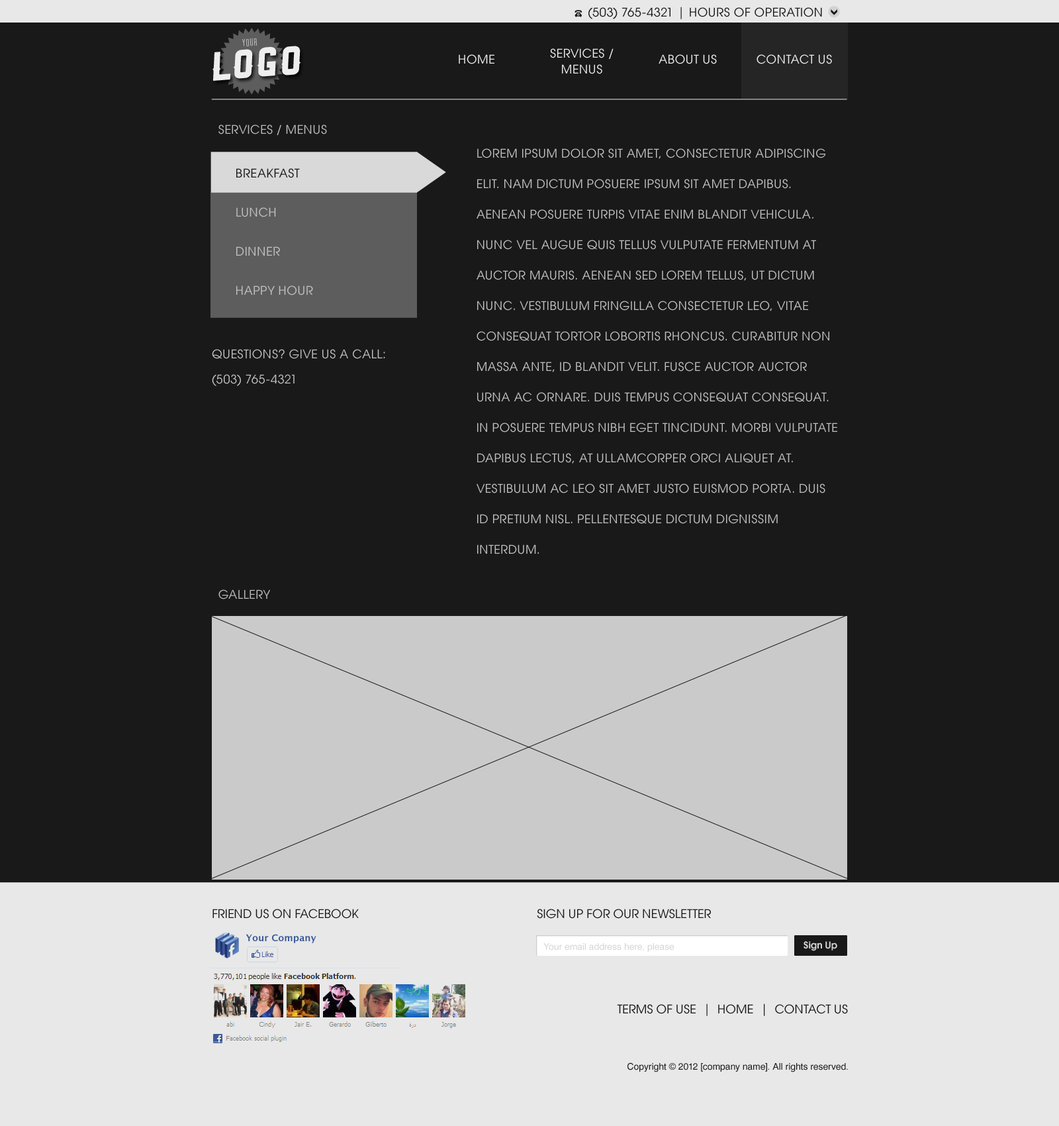
<style>
.page{position:relative;width:1059px;height:1126px;background:#1a1919}
.page>*{position:absolute;margin:0}
.t1{font:11.9px "AvantGardeCE-Book";letter-spacing:0.025em;color:#1a1919;text-transform:uppercase}
.t2{font:10.4px "ArvilSans";letter-spacing:0.05em;color:#c1c0c0}
.t3{font:38.7px "Ranger";letter-spacing:0.05em;color:#eeeeee}
.t4{font:11.9px/15.9px "AvantGardeCE-Book";letter-spacing:0.025em;color:#eeeeee;text-transform:uppercase}
.t5{font:11.9px "AvantGardeCE-Book";letter-spacing:0.025em;color:#eeeeee;text-transform:uppercase}
.t6{font:11.9px "AvantGardeCE-Book";letter-spacing:0.025em;color:#bcbcbc;text-transform:uppercase}
.t7{font:11.9px/30.5px "AvantGardeCE-Book";letter-spacing:0.025em;color:#c1c1c1;text-transform:uppercase}
.t8{font:11.9px/16.6px "AvantGardeCE-Book";letter-spacing:0.025em;color:#c1c1c1;text-transform:uppercase}
.t9{font:11.9px "AvantGardeCE-Book";color:#1a1919;text-transform:uppercase}
.t10{font:9.3px "LucidaSans-Demi";color:#3b5998}
.t11{font:9.3px "AvantGardeCE-Demi";color:#d5d5d5}
.t12{font:9.3px "HelveticaCE-Regular";color:#d5d5d5}
.t13{font:9.3px "HelveticaCE-Regular";color:#1a1919}
</style>
<div class="page">
<p class="t1" style="left:589px;top:7px;width:233px;height:12px">(503) 765-4321 | Hours of operation</p>
<p class="t2" style="left:242px;top:38px;width:15px;height:8px;rotate:-3deg">your</p>
<p class="t3" style="left:213px;top:46px;width:88px;height:35px;rotate:-4deg">Logo</p>
<p class="t4" style="left:550px;top:48px;width:64px;height:26px;text-align:center">Services /<br>Menus</p>
<p class="t5" style="left:459px;top:54px;width:36px;height:10px">Home</p>
<p class="t5" style="left:659px;top:54px;width:58px;height:10px">about us</p>
<p class="t5" style="left:757px;top:54px;width:75px;height:10px">contact us</p>
<p class="t6" style="left:218px;top:124px;width:109px;height:11px">Services / Menus</p>
<p class="t7" style="left:477px;top:148px;width:361px;height:406px">Lorem ipsum dolor sit amet, consectetur adipiscing elit. Nam dictum posuere ipsum sit amet dapibus. Aenean posuere turpis vitae enim blandit vehicula. Nunc vel augue quis tellus vulputate fermentum at auctor mauris. Aenean sed lorem tellus, ut dictum nunc. Vestibulum fringilla consectetur leo, vitae consequat tortor lobortis rhoncus. Curabitur non massa ante, id blandit velit. Fusce auctor auctor urna ac ornare. Duis tempus consequat consequat. In posuere tempus nibh eget tincidunt. Morbi vulputate dapibus lectus, at ullamcorper orci aliquet at. Vestibulum ac leo sit amet justo euismod porta. Duis id pretium nisl. Pellentesque dictum dignissim interdum.</p>
<p class="t8" style="left:212px;top:349px;width:173px;height:37px">Questions? Give us a call:<br>(503) 765-4321</p>
<p class="t6" style="left:218px;top:589px;width:53px;height:10px">Gallery</p>
<p class="t9" style="left:213px;top:908px;width:146px;height:10px">Friend us on Facebook</p>
<p class="t9" style="left:537px;top:908px;width:174px;height:10px">sign up for our newsletter</p>
<p class="t10" style="left:246px;top:934px;width:70px;height:9px">Your Company</p>
<p class="t11" style="left:804px;top:941px;width:34px;height:10px">Sign Up</p>
<p class="t12" style="left:544px;top:943px;width:131px;height:8px">Your email address here, please</p>
<p class="t9" style="left:617px;top:1003px;width:231px;height:13px">Terms of Use  |  Home  |  Contact Us</p>
<p class="t13" style="left:628px;top:1062px;width:220px;height:10px">Copyright © 2012 [company name]. All rights reserved.</p>
</div>
